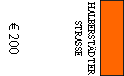
<style>
.page{position:relative;width:124px;height:76px;background:#ffffff}
.page>*{position:absolute;margin:0}
.t1{font:11px "AdobeDevanagari-Regular";color:#000000;scale:0.9 1}
.t2{font:14px "MyriadPro-Regular";color:#000000}
</style>
<div class="page">
<p class="t1" style="left:75px;top:2px;width:21px;height:73px;text-align:center;rotate:90deg">HALBERSTÄDTER<br>STRASSE</p>
<p class="t2" style="left:9px;top:23px;width:10px;height:31px;rotate:90deg">€ 200</p>
</div>
